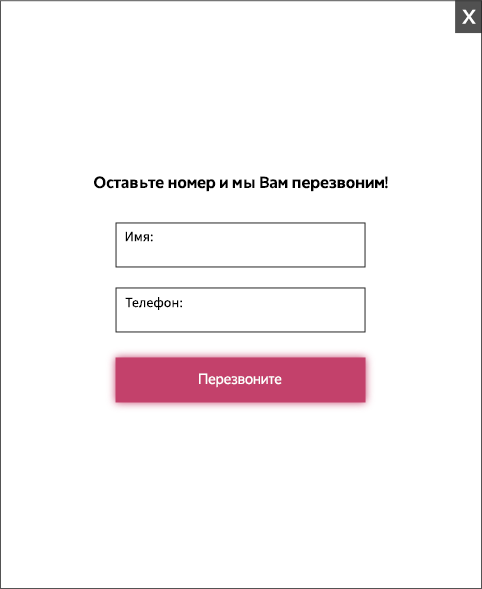
<style>
.page{position:relative;width:482px;height:589px;background:#ffffff}
.page>*{position:absolute;margin:0}
.t1{font:20px "Oxygen-Bold";letter-spacing:0.005em;color:#ffffff}
.t2{font:16px "Oxygen-Bold";letter-spacing:0.005em;color:#000000}
.t3{font:14px "SourceSansPro-Regular";letter-spacing:0.005em;color:#000000}
.t4{font:14px "Oxygen";letter-spacing:0.005em;color:#ffffff}
</style>
<div class="page">
<p class="t1" style="left:462px;top:9px;width:14px;height:15px">Х</p>
<p class="t2" style="left:94px;top:176px;width:294px;height:16px">Оставьте номер и мы Вам перезвоним!</p>
<p class="t3" style="left:125px;top:231px;width:28px;height:11px">Имя:</p>
<p class="t3" style="left:125px;top:297px;width:57px;height:13px">Телефон:</p>
<p class="t4" style="left:199px;top:373px;width:83px;height:15px">Перезвоните</p>
</div>
